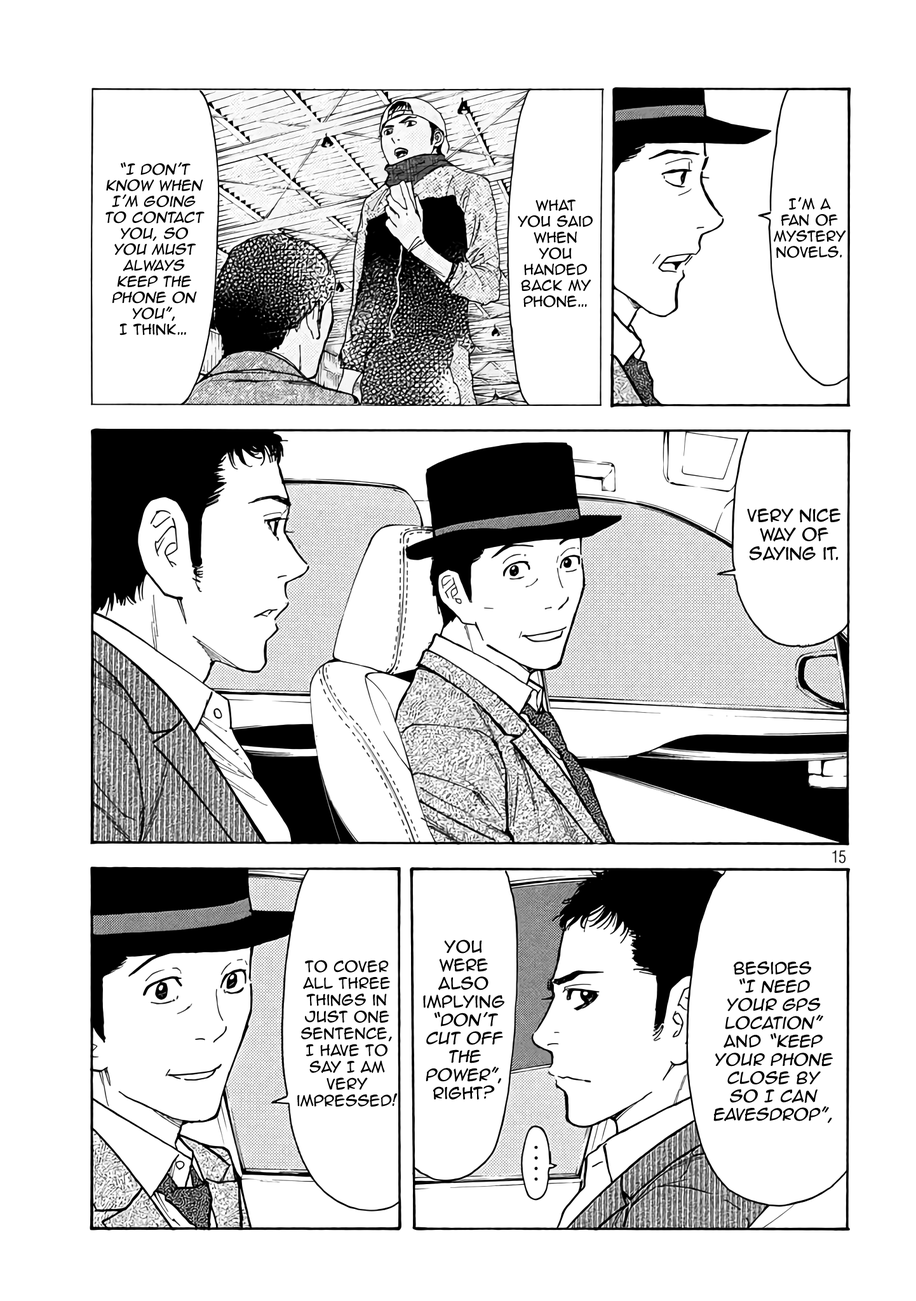
<style>
.page{position:relative;width:916px;height:1301px;background:#ffffff}
.page>*{position:absolute;margin:0}
.t1{font:13.3px "AnimeAce2.0BB";color:#000000;font-style:italic}
.t2{font:13.3px "AnimeAce2.0BB";color:#000000}
.t3{font:15.9px "AnimeAce2.0BB";color:#000000}
.t4{font:15.3px "AnimeAce2.0BB";color:#000000;font-style:italic}
.t5{font:15.3px "AnimeAce2.0BB";color:#000000}
.t6{font:14px "AnimeAce2.0BB";color:#000000}
</style>
<div class="page">
<p class="t1" style="left:105px;top:162px;width:100px;height:174px;text-align:center">“I don’t know when I’m going to contact you, so <br>you must always <br>keep the phone on you”<span class="t2">, <br>I think…</span></p>
<p class="t2" style="left:774px;top:197px;width:72px;height:61px;text-align:center">I’m a <br>fan of mystery novels.</p>
<p class="t2" style="left:518px;top:200px;width:75px;height:108px;text-align:center">what <br>you said when you handed back my phone…</p>
<p class="t3" style="left:747px;top:508px;width:94px;height:53px;text-align:center">Very nice way of saying it.</p>
<p class="t4" style="left:423px;top:940px;width:82px;height:160px;text-align:center"><span class="t5">You <br>were also implying </span>“don’t cut off the power”<span class="t5">, right?</span></p>
<p class="t6" style="left:297px;top:960px;width:101px;height:147px;text-align:center">to cover<br>all three things in just one sentence, I have to say I am very impressed!</p>
<p class="t4" style="left:714px;top:961px;width:119px;height:162px;text-align:center"><span class="t5">Besides <br></span>“I need <br>your GPS location”<span class="t5"> and </span>“keep your phone close by <br>so I can eavesdrop”,</p>
</div>
